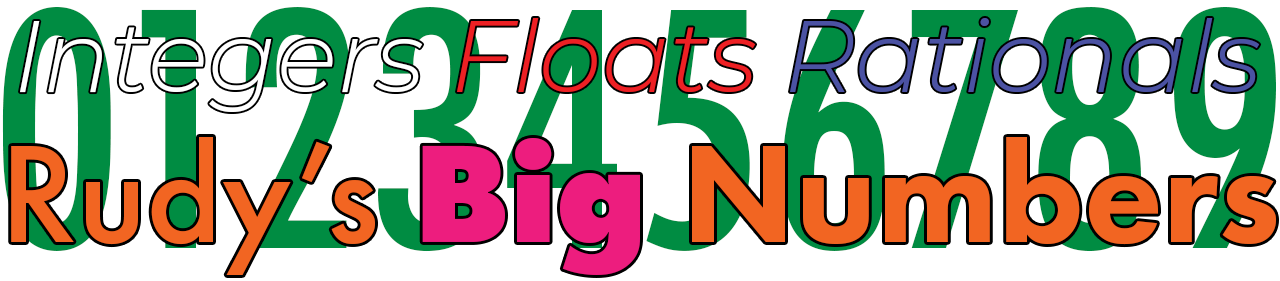
<style>
.page{position:relative;width:1280px;height:281px;background:#ffffff}
.page>*{position:absolute;margin:0}
.t1{font:356.5px "FuturaPTCond-Medium";color:#008c42}
.t2{font:143.5px "FuturaPT-Heavy";color:#f26522}
.t3{font:143.5px "FuturaPT-Medium";color:#f26522}
.t4{font:143.5px "FuturaPT-ExtraBold";color:#ed1d7e}
</style>
<div class="page">
<p class="t1" style="left:2px;top:7px;width:1274px;height:245px">0123456789</p>
<p class="t2" style="left:11px;top:137px;width:1265px;height:138px"><span class="t3">Rudy’s </span><span class="t4">Big </span>Numbers</p>
</div>
